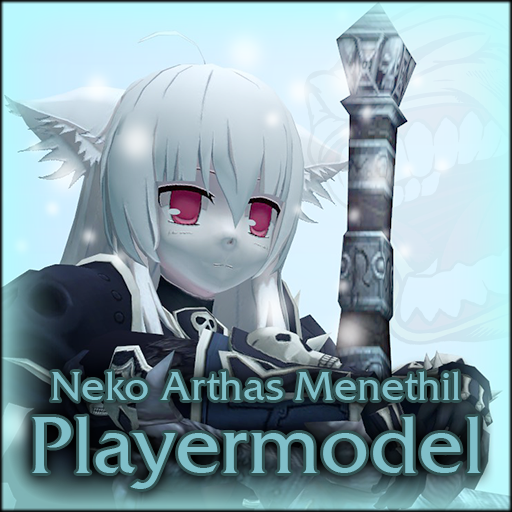
<style>
.page{position:relative;width:512px;height:512px}
.page>*{position:absolute;margin:0}
.t1{font:40px "FrizQuadrataTT";color:#80bfc9}
.t2{font:78px/72px "FrizQuadrataTT";color:#80bfc9}
</style>
<div class="page">
<p class="t1" style="left:32px;top:371px;width:449px;height:118px;text-align:center">Neko Arthas Menethil<br><span class="t2">Playermodel</span></p>
</div>
